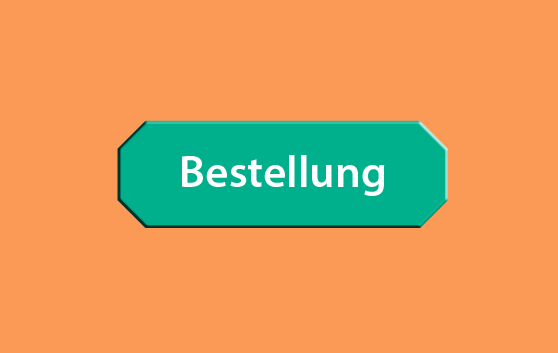
<style>
.page{position:relative;width:558px;height:353px;background:#fb9957}
.page>*{position:absolute;margin:0}
.t1{font:45px "MyriadPro-Semibold";color:#ffffff}
</style>
<div class="page">
<p class="t1" style="left:182px;top:155px;width:203px;height:41px">Bestellung</p>
</div>
